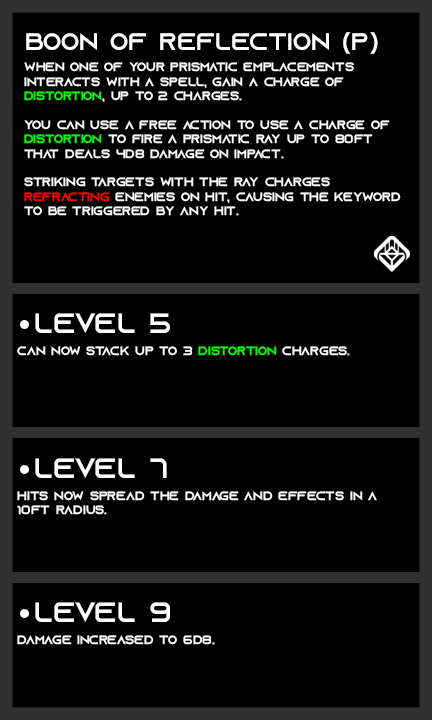
<style>
.page{position:relative;width:432px;height:720px;background:#000000}
.page>*{position:absolute;margin:0}
.t1{font:24px "AzonixRegular";color:#ffffff}
.t2{font:12px "AzonixRegular";color:#ffffff}
.t3{font:12px "AzonixRegular";color:#00ff00}
.t4{font:12px "AzonixRegular";color:#ff0000}
.t5{font:28px "AzonixRegular";color:#ffffff}
</style>
<div class="page">
<p class="t1" style="left:26px;top:32px;width:352px;height:22px">boon of reflection (p)</p>
<p class="t2" style="left:24px;top:62px;width:377px;height:154px">when one of your prismatic emplacements <br>interacts with a spell, gain a charge of <br><span class="t3">distortion</span>, up to 2 charges.<br><br>you can use a free action to use a charge of<br><span class="t3">distortion</span> to fire a prismatic ray up to 80ft<br>that deals 4d8 damage on impact.<br><br>striking targets with the ray charges <br><span class="t4">refracting</span> enemies on hit, causing the keyword<br>to be triggered by any hit.</p>
<p class="t5" style="left:35px;top:313px;width:135px;height:20px">level 5</p>
<p class="t2" style="left:17px;top:346px;width:333px;height:10px">can now stack up to 3 <span class="t3">distortion</span> charges.</p>
<p class="t5" style="left:35px;top:458px;width:132px;height:20px">level 7</p>
<p class="t2" style="left:17px;top:491px;width:360px;height:24px">hits now spread the damage and effects in a <br>10ft radius.</p>
<p class="t5" style="left:35px;top:602px;width:135px;height:20px">level 9</p>
<p class="t2" style="left:17px;top:635px;width:198px;height:10px">damage increased to 6d8.</p>
</div>
